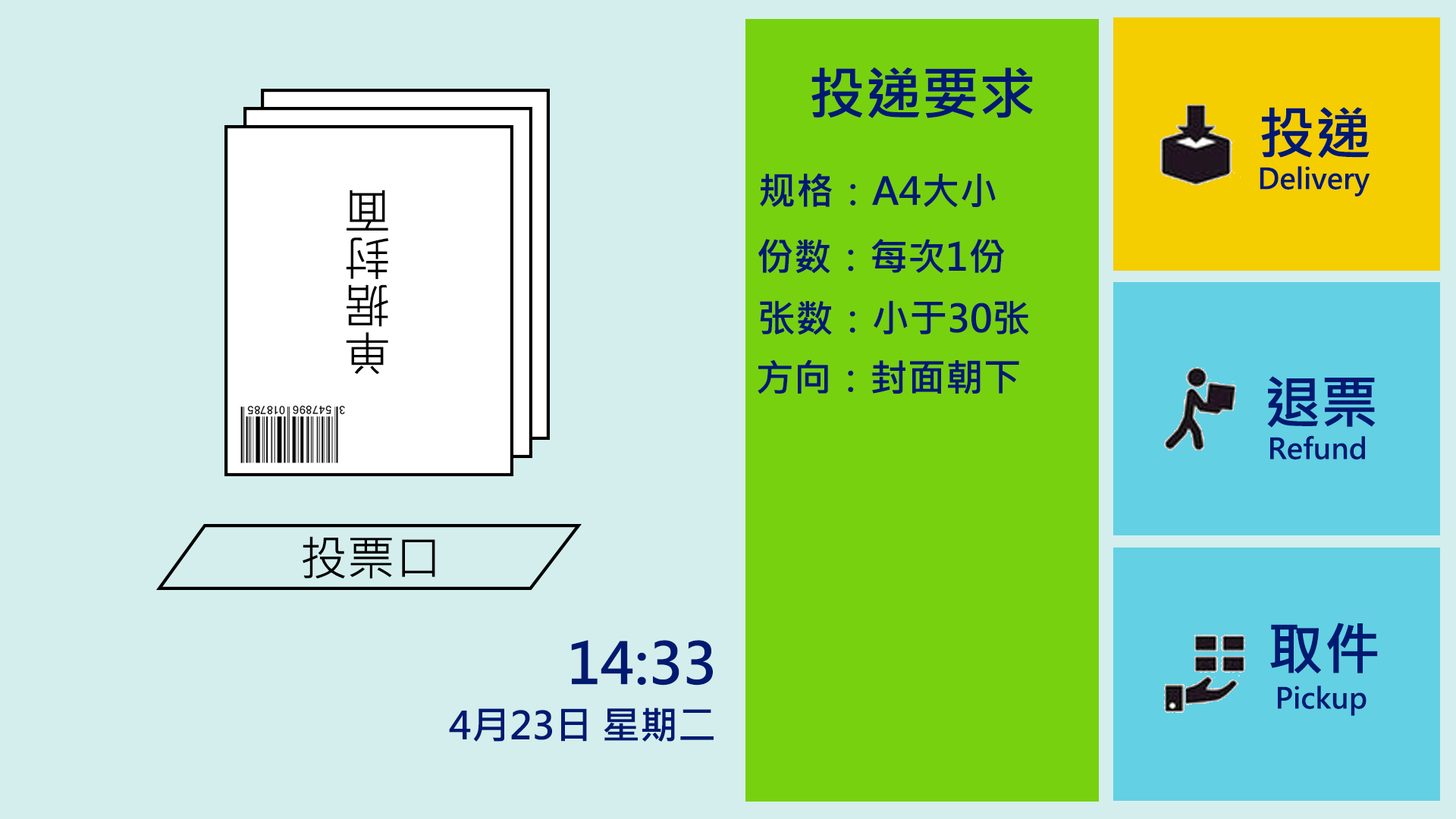
<style>
.page{position:relative;width:1456px;height:819px;background:#d4eeee}
.page>*{position:absolute;margin:0}
.t1{font:56.9px "MicrosoftJhengHeiBold";color:#001a71}
.t2{font:37.9px "MicrosoftJhengHeiBold";color:#001a71}
.t3{font:28.4px "MicrosoftJhengHeiBold";color:#001a71}
.t4{font:47.4px "MicrosoftJhengHeiRegular";color:#000000}
</style>
<div class="page">
<p class="t1" style="left:811px;top:67px;width:222px;height:51px">投递要求</p>
<p class="t1" style="left:1261px;top:107px;width:109px;height:51px">投递</p>
<p class="t2" style="left:760px;top:173px;width:236px;height:35px">规格：A4大小</p>
<p class="t3" style="left:1260px;top:166px;width:110px;height:30px">Delivery</p>
<p class="t4" style="left:346px;top:190px;width:43px;height:185px;rotate:180deg">单据封面</p>
<p class="t2" style="left:758px;top:239px;width:247px;height:35px">份数：每次1份</p>
<p class="t2" style="left:760px;top:300px;width:269px;height:35px">张数：小于30张</p>
<p class="t2" style="left:758px;top:359px;width:261px;height:35px">方向：封面朝下</p>
<p class="t1" style="left:1267px;top:376px;width:109px;height:52px">退票</p>
<p class="t3" style="left:1270px;top:435px;width:95px;height:25px">Refund</p>
<p class="t4" style="left:303px;top:536px;width:132px;height:43px">投票口</p>
<p class="t1" style="left:1270px;top:623px;width:108px;height:51px">取件</p>
<p class="t1" style="left:571px;top:640px;width:142px;height:46px">14:33</p>
<p class="t3" style="left:1278px;top:686px;width:88px;height:30px">Pickup</p>
<p class="t2" style="left:449px;top:708px;width:265px;height:34px">4月23日 星期二</p>
</div>
